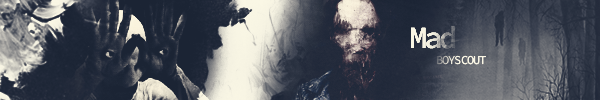
<style>
.page{position:relative;width:600px;height:100px}
.page>*{position:absolute;margin:0}
.t1{font:31px "SourceCodeRoman-Medium";letter-spacing:-0.105em}
.t2{font:12px "SourceCodeVariable-Roman";letter-spacing:-0.085em;color:#f9f6e4}
</style>
<div class="page">
<p class="t1" style="left:411px;top:26px;width:44px;height:23px">Mad</p>
<p class="t2" style="left:437px;top:55px;width:49px;height:10px">BOYSCOUT</p>
</div>
